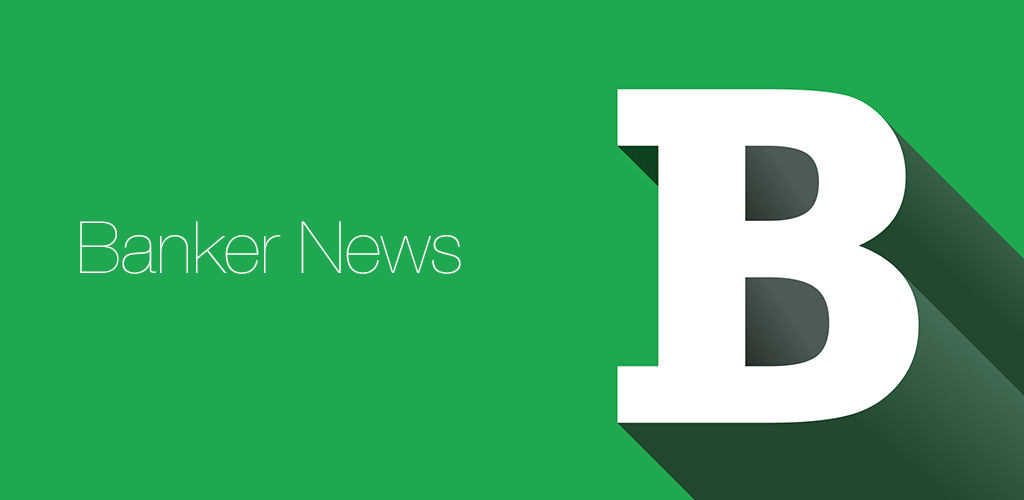
<style>
.page{position:relative;width:1024px;height:500px;background:#20a851}
.page>*{position:absolute;margin:0}
.t1{font:72px "HelveticaNeue-UltraLight";color:#ffffff}
</style>
<div class="page">
<p class="t1" style="left:80px;top:221px;width:381px;height:53px">Banker News</p>
</div>
